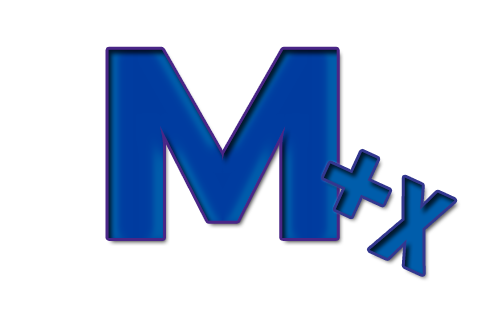
<style>
.page{position:relative;width:480px;height:320px;background:#ffffff}
.page>*{position:absolute;margin:0}
.t1{font:245.8px "AgencyFB-Bold";color:#003ca0;scale:2.01 1}
.t2{font:162.6px "AgencyFB-Bold";color:#005dab}
</style>
<div class="page">
<p class="t1" style="left:108px;top:49px;width:229px;height:189px">M</p>
<p class="t2" style="left:324px;top:151px;width:131px;height:123px;rotate:25deg">+x</p>
</div>
